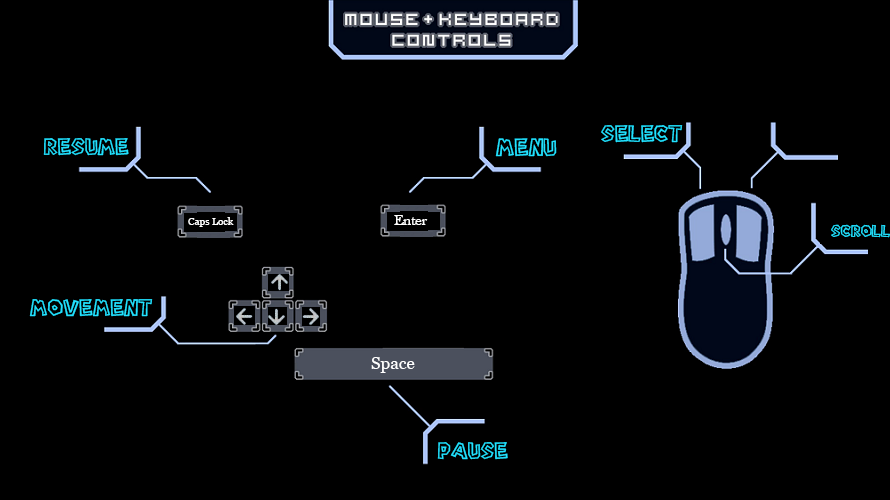
<style>
.page{position:relative;width:890px;height:500px;background:#000000}
.page>*{position:absolute;margin:0}
.t1{font:21px "Super-Mario-Bros.-Regular";color:#22e2ff}
.t2{font:22px "Super-Mario-Bros.-Regular";color:#22e2ff}
.t3{font:15px "BaskOldFace";color:#ffffff}
.t4{font:15px "Super-Mario-Bros.-Regular";color:#22e2ff}
</style>
<div class="page">
<p class="t1" style="left:601px;top:125px;width:82px;height:18px">Select</p>
<p class="t1" style="left:43px;top:138px;width:86px;height:18px">Resume</p>
<p class="t2" style="left:495px;top:138px;width:62px;height:19px">Menu</p>
<p class="t3" style="left:394px;top:215px;width:34px;height:10px">Enter</p>
<p class="t4" style="left:831px;top:224px;width:59px;height:14px">Scroll</p>
<p class="t1" style="left:29px;top:299px;width:124px;height:18px">Movement</p>
<p class="t1" style="left:437px;top:442px;width:71px;height:18px">Pause</p>
</div>
